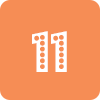
<style>
.page{position:relative;width:100px;height:100px;background:#f68d55}
.page>*{position:absolute;margin:0}
.t1{font:62.9px "BudmoJiggler-Regular";color:#ffffff;text-transform:uppercase}
</style>
<div class="page">
<p class="t1" style="left:32px;top:31px;width:35px;height:41px">11</p>
</div>
